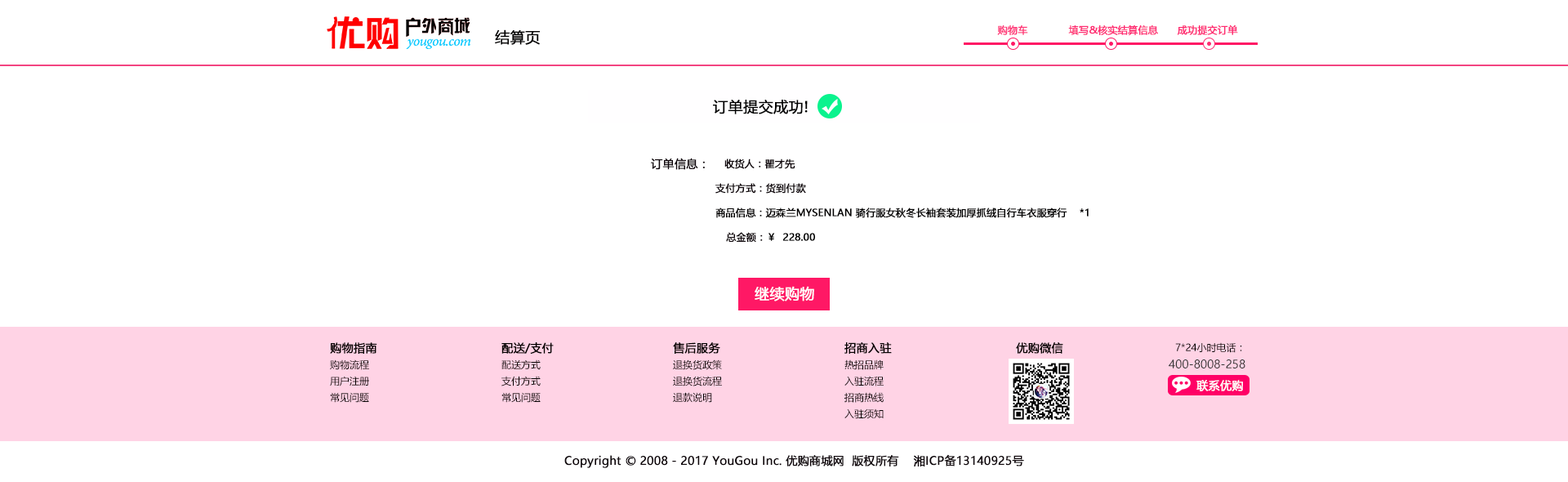
<style>
.page{position:relative;width:1568px;height:482px;background:#ffffff}
.page>*{position:absolute;margin:0}
.t1{font:14.7px "MicrosoftYaHei";color:#010000;font-weight:bold}
.t2{font:9.8px "MicrosoftYaHei";color:#ff3679;font-weight:bold}
.t3{font:9.8px "MicrosoftYaHei";color:#ff2b72;font-weight:bold}
.t4{font:9.8px "MicrosoftYaHei";color:#ff2a71;font-weight:bold}
.t5{font:14.7px "MicrosoftYaHei";color:#000000;font-weight:bold}
.t6{font:11.4px "MicrosoftYaHei";color:#000000;font-weight:bold}
.t7{font:9.8px "MicrosoftYaHei";color:#000000;font-weight:bold}
.t8{font:9.8px "MicrosoftYaHei";color:#010000;font-weight:bold}
.t9{font:14.7px "MicrosoftYaHei";color:#ffffff;font-weight:bold}
.t10{font:11.4px "MicrosoftYaHei";color:#040000;font-weight:bold}
.t11{font:9.8px "MicrosoftYaHei";color:#040000}
.t12{font:11.4px "MicrosoftYaHei";color:#323333}
.t13{font:11.4px "MicrosoftYaHei";color:#ffffff;font-weight:bold}
.t14{font:11.4px "MicrosoftYaHei";color:#0e050a;font-weight:bold}
</style>
<div class="page">
<p class="t1" style="left:495px;top:29px;width:45px;height:16px">结算页</p>
<p class="t2" style="left:997px;top:25px;width:31px;height:10px">购物车</p>
<p class="t3" style="left:1068px;top:25px;width:90px;height:10px">填写&amp;核实结算信息</p>
<p class="t4" style="left:1177px;top:24px;width:61px;height:11px">成功提交订单</p>
<p class="t5" style="left:713px;top:100px;width:95px;height:14px">订单提交成功!</p>
<p class="t6" style="left:651px;top:158px;width:54px;height:12px">订单信息：</p>
<p class="t7" style="left:724px;top:158px;width:71px;height:11px">收货人：瞿才先</p>
<p class="t7" style="left:715px;top:183px;width:91px;height:11px">支付方式：货到付款</p>
<p class="t8" style="left:715px;top:207px;width:374px;height:11px">商品信息：迈森兰MYSENLAN 骑行服女秋冬长袖套装加厚抓绒自行车衣服穿行    *1</p>
<p class="t7" style="left:726px;top:232px;width:89px;height:11px">总金额：￥  228.00</p>
<p class="t9" style="left:755px;top:286px;width:59px;height:15px">继续购物</p>
<p class="t10" style="left:330px;top:342px;width:47px;height:12px">购物指南</p>
<p class="t10" style="left:501px;top:342px;width:53px;height:12px">配送/支付</p>
<p class="t10" style="left:673px;top:342px;width:47px;height:12px">售后服务</p>
<p class="t10" style="left:844px;top:342px;width:48px;height:12px">招商入驻</p>
<p class="t10" style="left:1016px;top:342px;width:47px;height:12px">优购微信</p>
<p class="t11" style="left:1175px;top:342px;width:67px;height:11px">7*24小时电话：</p>
<p class="t11" style="left:330px;top:359px;width:39px;height:11px">购物流程</p>
<p class="t11" style="left:501px;top:359px;width:40px;height:11px">配送方式</p>
<p class="t11" style="left:673px;top:359px;width:49px;height:11px">退换货政策</p>
<p class="t11" style="left:844px;top:359px;width:40px;height:11px">热招品牌</p>
<p class="t12" style="left:1169px;top:359px;width:76px;height:9px">400-8008-258</p>
<p class="t11" style="left:330px;top:376px;width:39px;height:10px">用户注册</p>
<p class="t11" style="left:501px;top:376px;width:40px;height:10px">支付方式</p>
<p class="t11" style="left:673px;top:376px;width:49px;height:10px">退换货流程</p>
<p class="t11" style="left:844px;top:376px;width:40px;height:10px">入驻流程</p>
<p class="t13" style="left:1196px;top:380px;width:47px;height:11px">联系优购</p>
<p class="t11" style="left:330px;top:392px;width:39px;height:11px">常见问题</p>
<p class="t11" style="left:501px;top:392px;width:40px;height:11px">常见问题</p>
<p class="t11" style="left:673px;top:392px;width:39px;height:11px">退款说明</p>
<p class="t11" style="left:844px;top:392px;width:40px;height:11px">招商热线</p>
<p class="t11" style="left:844px;top:408px;width:40px;height:11px">入驻须知</p>
<p class="t14" style="left:564px;top:454px;width:460px;height:14px">Copyright © 2008 - 2017 YouGou Inc. 优购商城网  版权所有    湘ICP备13140925号</p>
</div>
